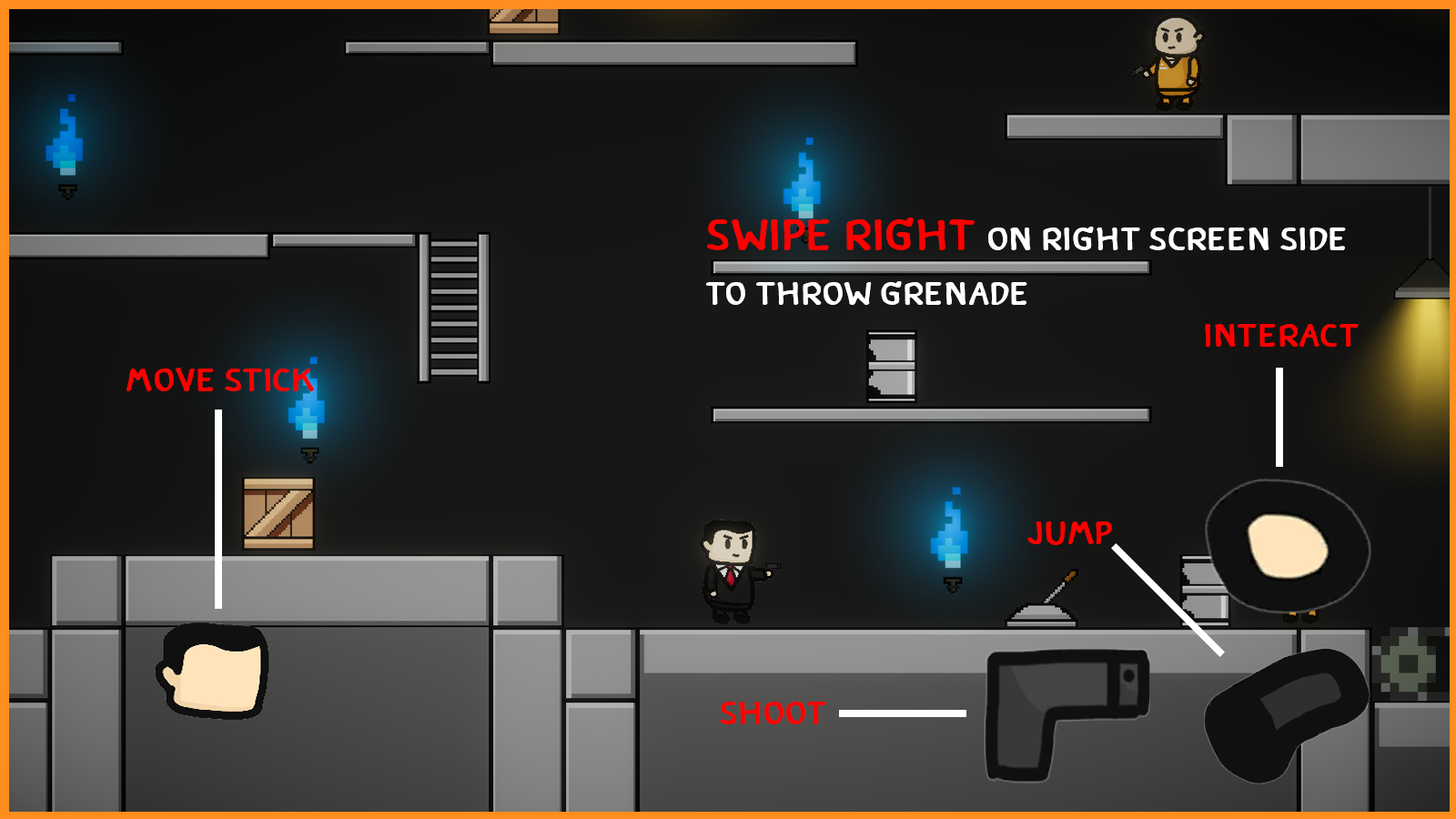
<style>
.page{position:relative;width:1456px;height:819px}
.page>*{position:absolute;margin:0}
.t1{font:45.5px "Arabica";color:#ffffff}
.t2{font:60.7px "Arabica";color:#ff0000}
.t3{font:45.5px "Arabica";color:#ff0000}
</style>
<div class="page">
<p class="t1" style="left:706px;top:217px;width:640px;height:88px"><span class="t2">swipe right </span>on right screen side<br>to throw grenade</p>
<p class="t3" style="left:1205px;top:324px;width:154px;height:23px">Interact</p>
<p class="t3" style="left:126px;top:368px;width:189px;height:23px">move stick</p>
<p class="t3" style="left:1027px;top:521px;width:85px;height:24px">jump</p>
<p class="t3" style="left:720px;top:702px;width:106px;height:22px">shoot</p>
</div>
